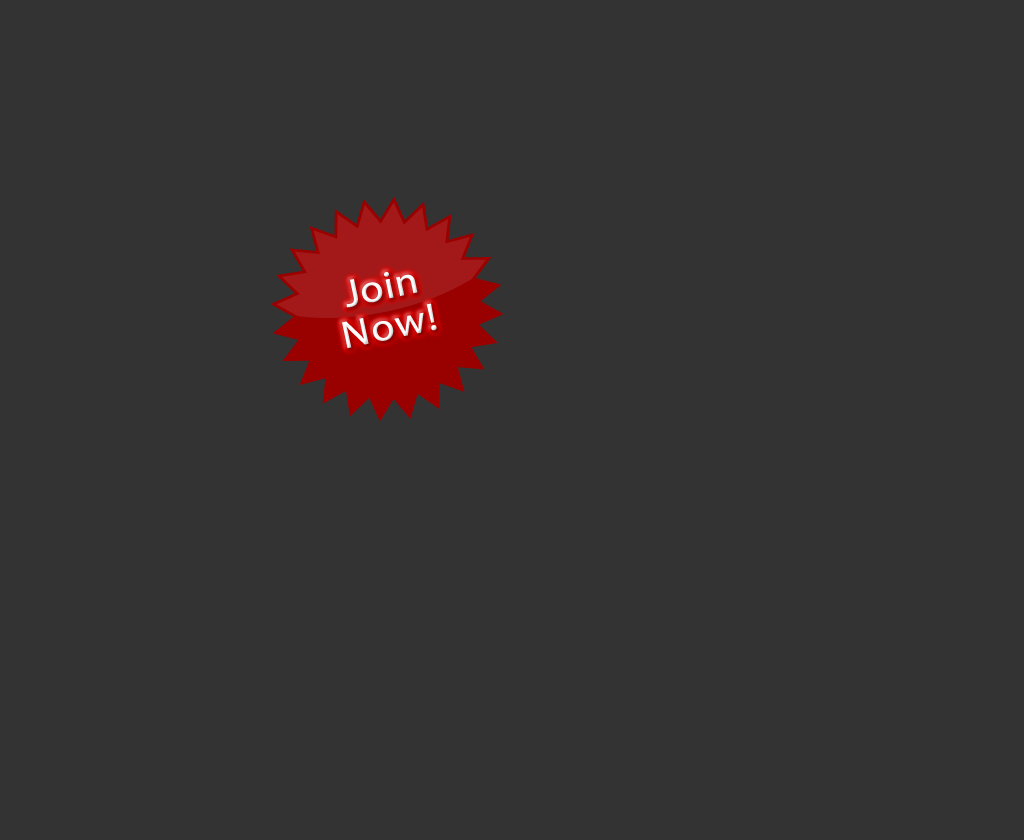
<style>
.page{position:relative;width:1024px;height:840px;background:#333333}
.page>*{position:absolute;margin:0}
.t1{font:38.6px "MyriadPro-Regular";color:#ffffff;font-weight:bold;scale:1.08 1}
</style>
<div class="page">
<p class="t1" style="left:342px;top:272px;width:95px;height:77px;rotate:-12deg">Join Now!</p>
</div>
